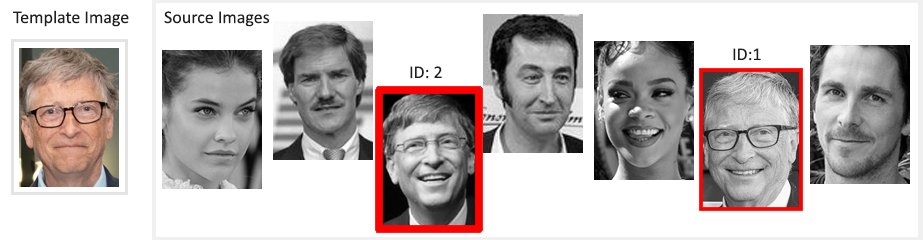
<style>
.page{position:relative;width:923px;height:240px;background:#ffffff}
.page>*{position:absolute;margin:0}
.t1{font:18px "Calibri";color:#1f1f1f}
</style>
<div class="page">
<p class="t1" style="left:13px;top:10px;width:116px;height:17px">Template Image</p>
<p class="t1" style="left:164px;top:11px;width:105px;height:16px">Source Images</p>
<p class="t1" style="left:733px;top:48px;width:28px;height:13px">ID:1</p>
<p class="t1" style="left:410px;top:66px;width:32px;height:13px">ID: 2</p>
</div>
